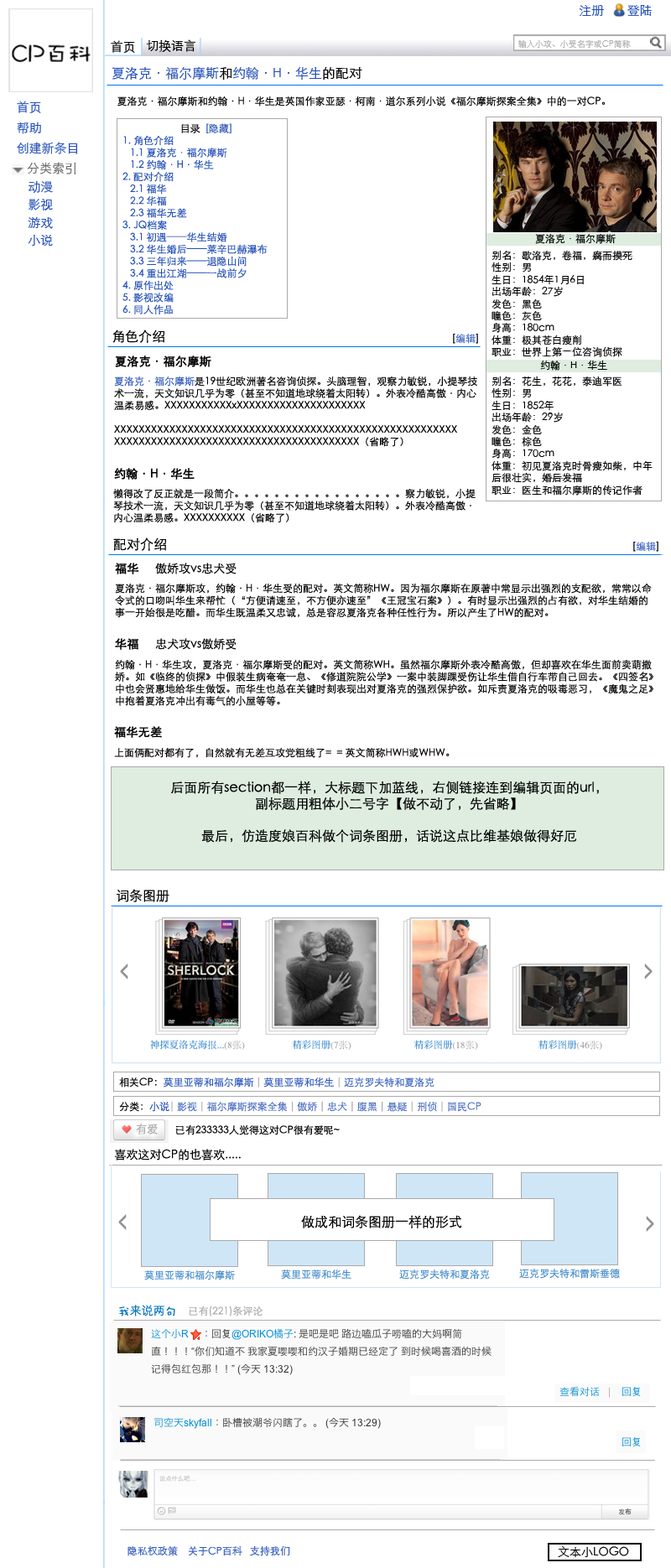
<style>
.page{position:relative;width:671px;height:1568px;background:#ffffff}
.page>*{position:absolute;margin:0}
.t1{font:12.6px "STHeitiSC-Light";color:#224eb7}
.t2{font:12.6px "STHeitiSC-Light";color:#000000}
.t3{font:8.4px "STHeitiSC-Light";color:#aaaaaa}
.t4{font:13.4px "STHeitiSC-Light";color:#224eb7}
.t5{font:13.4px "STHeitiSC-Light";color:#000000}
.t6{font:10.1px "STHeitiSC-Light";color:#000000}
.t7{font:10.1px "STHeitiSC-Light";color:#224eb7}
.t8{font:10.1px "STHeitiSC-Light";color:#2f58bb}
.t9{font:12.6px "STHeitiSC-Light";color:#656565}
.t10{font:10.1px "STHeitiSC-Light";color:#486cc3}
.t11{font:11.7px "STHeitiSC-Light";color:#000000;font-weight:bold}
.t12{font:11.7px "STHeitiSC-Light";color:#000000}
.t13{font:10.1px "STHeitiSC-Light";color:#315abc}
.t14{font:10.1px "STHeitiSC-Light";color:#aaaaaa}
.t15{font:10.1px "STHeitiSC-Light";color:#3d64c0}
.t16{font:10.1px "STHeitiSC-Light";color:#4e71c5}
.t17{font:10.9px "STHeitiSC-Light";color:#aaaaaa}
.t18{font:10.1px "STHeitiSC-Light";color:#448ccb}
.t19{font:11.7px "DFWaWa-W5-WINP-BF";color:#0072bc}
.t20{font:11.7px "STHeitiSC-Light";color:#0072bc}
</style>
<div class="page">
<p class="t1" style="left:579px;top:5px;width:25px;height:11px">注册</p>
<p class="t1" style="left:627px;top:5px;width:25px;height:12px">登陆</p>
<p class="t2" style="left:111px;top:40px;width:24px;height:13px">首页</p>
<p class="t2" style="left:146px;top:39px;width:50px;height:13px">切换语言</p>
<p class="t3" style="left:517px;top:39px;width:114px;height:10px">输入小攻、小受名字或CP简称</p>
<p class="t4" style="left:112px;top:66px;width:250px;height:14px">夏洛克·福尔摩斯<span class="t5">和</span>约翰·H·华生<span class="t5">的配对</span></p>
<p class="t1" style="left:17px;top:101px;width:24px;height:12px">首页</p>
<p class="t6" style="left:117px;top:96px;width:488px;height:10px">夏洛克·福尔摩斯和约翰·H·华生是英国作家亚瑟·柯南·道尔系列小说《福尔摩斯探案全集》中的一对CP。</p>
<p class="t1" style="left:17px;top:122px;width:24px;height:12px">帮助</p>
<p class="t7" style="left:122px;top:123px;width:145px;height:191px;text-align:center"><span class="t6">目录</span><span class="t8">  [隐藏]<br></span>1. 角色介绍<br>   1.1 夏洛克·福尔摩斯<br>   1.2 约翰·H·华生<br>2. 配对介绍<br>   2.1 福华<br>   2.2 华福<br>   2.3 福华无差<br>3. JQ档案 <br>   3.1 初遇——华生结婚<br>   3.2 华生婚后——莱辛巴赫瀑布<br>   3.3 三年归来——退隐山间<br>   3.4 重出江湖——一战前夕<br>4. 原作出处<br>5. 影视改编<br>6. 同人作品<br>7. 外部链接</p>
<p class="t1" style="left:17px;top:142px;width:61px;height:12px">创建新条目</p>
<p class="t9" style="left:27px;top:162px;width:49px;height:12px">分类索引</p>
<p class="t1" style="left:29px;top:181px;width:24px;height:12px">动漫</p>
<p class="t1" style="left:29px;top:199px;width:24px;height:11px">影视</p>
<p class="t1" style="left:28px;top:217px;width:25px;height:12px">游戏</p>
<p class="t6" style="left:535px;top:234px;width:80px;height:10px">夏洛克·福尔摩斯</p>
<p class="t1" style="left:28px;top:235px;width:25px;height:11px">小说</p>
<p class="t6" style="left:491px;top:251px;width:142px;height:106px">别名：歇洛克，卷福，腐而摸死<br>性别：男<br>生日：1854年1月6日<br>出场年龄：27岁<br>发色：黑色<br>瞳色：灰色<br>身高：180cm<br>体重：极其苍白瘦削<br>职业：世界上第一位咨询侦探</p>
<p class="t5" style="left:112px;top:330px;width:52px;height:13px">角色介绍</p>
<p class="t10" style="left:453px;top:334px;width:25px;height:10px"><span class="t6">[</span>编辑<span class="t6">]</span></p>
<p class="t11" style="left:115px;top:356px;width:96px;height:11px">夏洛克·福尔摩斯</p>
<p class="t6" style="left:540px;top:361px;width:67px;height:10px">约翰·H·华生</p>
<p class="t6" style="left:114px;top:376px;width:363px;height:71px"><span class="t8">夏洛克·福尔摩斯</span>是19世纪欧洲著名咨询侦探。头脑理智，观察力敏锐，小提琴技<br>术一流，天文知识几乎为零（甚至不知道地球绕着太阳转）。外表冷酷高傲·内心<br>温柔易感。XXXXXXXXXXXxXXXXXXXXXXXXXXXXXXXXX<br><br>XXXXXXXXXXXXXXXXXXXXXXXXXXXXXXXXXXXXXXXXXXXXXXXXXXXXXXXX<br>XXXXXXXXXXXXXXXXXXXXXXXXXXXXXXXXXXXXXXXX（省略了）</p>
<p class="t6" style="left:491px;top:376px;width:161px;height:120px">别名：花生，花花，泰迪军医<br>性别：男<br>生日：1852年<br>出场年龄：29岁<br>发色：金色<br>瞳色：棕色<br>身高：170cm<br>体重：初见夏洛克时骨瘦如柴，中年<br>后很壮实，婚后发福<br>职业：医生和福尔摩斯的传记作者</p>
<p class="t11" style="left:114px;top:468px;width:81px;height:12px">约翰·H·华生</p>
<p class="t6" style="left:113px;top:489px;width:362px;height:34px">懒得改了反正就是一段简介。。。。。。。。。。。。。。。。。察力敏锐，小提<br>琴技术一流，天文知识几乎为零（甚至不知道地球绕着太阳转）。外表冷酷高傲·<br>内心温柔易感。XXXXXXXXXX（省略了）</p>
<p class="t5" style="left:113px;top:537px;width:53px;height:14px">配对介绍</p>
<p class="t10" style="left:633px;top:542px;width:25px;height:10px"><span class="t6">[</span>编辑<span class="t6">]</span></p>
<p class="t12" style="left:115px;top:563px;width:121px;height:11px"><span class="t11">福华     </span>傲娇攻vs忠犬受</p>
<p class="t6" style="left:115px;top:583px;width:537px;height:35px">夏洛克·福尔摩斯攻，约翰·H·华生受的配对。英文简称HW。因为福尔摩斯在原著中常显示出强烈的支配欲，常常以命<br>令式的口吻叫华生来帮忙（“方便请速至，不方便亦速至”《王冠宝石案》）。有时显示出强烈的占有欲，对华生结婚的<br>事一开始很是吃醋。而华生既温柔又忠诚，总是容忍夏洛克各种任性行为。所以产生了HW的配对。</p>
<p class="t12" style="left:115px;top:638px;width:121px;height:12px"><span class="t11">华福     </span>忠犬攻vs傲娇受</p>
<p class="t6" style="left:115px;top:660px;width:538px;height:46px">约翰·H·华生攻，夏洛克·福尔摩斯受的配对。英文简称WH。虽然福尔摩斯外表冷酷高傲，但却喜欢在华生面前卖萌撒<br>娇。如《临终的侦探》中假装生病奄奄一息、《修道院院公学》一案中装脚踝受伤让华生借自行车带自己回去。《四签名》<br>中也会贤惠地给华生做饭。而华生也总在关键时刻表现出对夏洛克的强烈保护欲。如斥责夏洛克的吸毒恶习，《魔鬼之足》<br>中抱着夏洛克冲出有毒气的小屋等等。</p>
<p class="t11" style="left:114px;top:726px;width:48px;height:12px">福华无差</p>
<p class="t6" style="left:114px;top:747px;width:335px;height:11px">上面俩配对都有了，自然就有无差互攻党粗线了=  = 英文简称HWH或WHW。</p>
<p class="t5" style="left:171px;top:781px;width:428px;height:62px;text-align:center">后面所有section都一样，大标题下加蓝线，右侧链接连到编辑页面的url，<br>副标题用粗体小二号字【做不动了，先省略】<br><br>最后，仿造度娘百科做个词条图册，话说这点比维基娘做得好厄</p>
<p class="t5" style="left:117px;top:889px;width:52px;height:13px">词条图册</p>
<p class="t13" style="left:119px;top:1077px;width:315px;height:11px"><span class="t6">相关CP：</span>莫里亚蒂和福尔摩斯 <span class="t14">| </span>莫里亚蒂和华生 <span class="t14">| </span><span class="t15">迈克罗夫特和夏洛克</span></p>
<p class="t16" style="left:119px;top:1101px;width:362px;height:11px"><span class="t6">分类：</span><span class="t7">小说</span><span class="t14">|</span> 影视 <span class="t14">|</span> 福尔摩斯探案全集 <span class="t14">|</span> 傲娇 <span class="t14">| </span>忠犬 <span class="t14">|</span> 腹黑 <span class="t14">| </span>悬疑 <span class="t14">|</span> 刑侦 <span class="t14">|</span> 国民CP</p>
<p class="t17" style="left:136px;top:1124px;width:22px;height:10px">有爱</p>
<p class="t6" style="left:176px;top:1124px;width:164px;height:11px">已有233333人觉得这对CP很有爱呢~</p>
<p class="t12" style="left:115px;top:1149px;width:126px;height:11px">喜欢这对CP的也喜欢.....</p>
<p class="t5" style="left:301px;top:1215px;width:161px;height:13px">做成和词条图册一样的形式</p>
<p class="t18" style="left:144px;top:1270px;width:91px;height:10px">莫里亚蒂和福尔摩斯</p>
<p class="t18" style="left:281px;top:1269px;width:70px;height:11px">莫里亚蒂和华生</p>
<p class="t18" style="left:399px;top:1269px;width:91px;height:11px">迈克罗夫特和夏洛克</p>
<p class="t18" style="left:519px;top:1269px;width:101px;height:10px">迈克罗夫特和雷斯垂德</p>
<p class="t14" style="left:119px;top:1305px;width:143px;height:11px"><span class="t19">我</span><span class="t20">来说两</span><span class="t19">句   </span>已有(221)条评论</p>
<p class="t13" style="left:127px;top:1545px;width:163px;height:11px">隐私权政策    关于CP百科   支持我们</p>
<p class="t12" style="left:558px;top:1546px;width:71px;height:11px">文本小LOGO</p>
</div>
